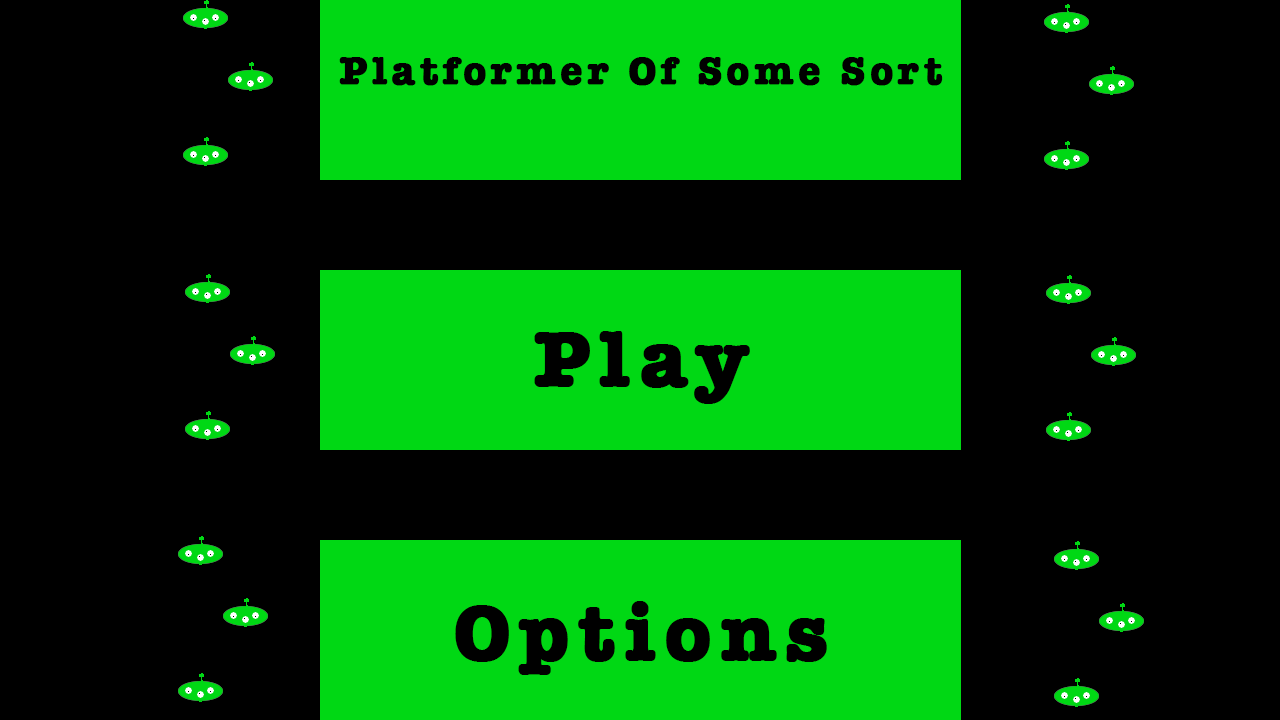
<style>
.page{position:relative;width:1280px;height:720px;background:#000000}
.page>*{position:absolute;margin:0}
.t1{font:40px "AmericanTypewriter-Bold";letter-spacing:0.1em;color:#000000;font-weight:bold}
.t2{font:81px "AmericanTypewriter-Bold";letter-spacing:0.1em;color:#000000;font-weight:bold}
</style>
<div class="page">
<p class="t1" style="left:339px;top:57px;width:604px;height:29px">Platformer Of Some Sort</p>
<p class="t2" style="left:534px;top:331px;width:216px;height:73px">Play</p>
<p class="t2" style="left:455px;top:601px;width:372px;height:74px">Options</p>
</div>
